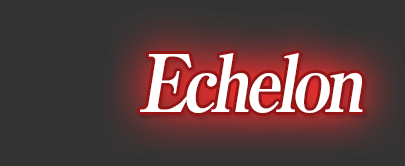
<style>
.page{position:relative;width:405px;height:166px;background:#333333}
.page>*{position:absolute;margin:0}
.t1{font:80px "RyuminPro-ExBold";letter-spacing:-0.08em;color:#ffffff;font-style:italic;scale:0.9 1}
</style>
<div class="page">
<p class="t1" style="left:140px;top:53px;width:223px;height:60px">Echelon</p>
</div>
